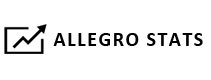
<style>
.page{position:relative;width:211px;height:80px;background:#ffffff}
.page>*{position:absolute;margin:0}
.t1{font:20px "Calibri-Bold";letter-spacing:0.075em;color:#000000}
</style>
<div class="page">
<p class="t1" style="left:53px;top:33px;width:150px;height:13px">ALLEGRO STATS</p>
</div>
